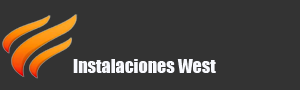
<style>
.page{position:relative;width:300px;height:90px;background:#333333}
.page>*{position:absolute;margin:0}
.t1{font:18px "Impact";color:#f8f9fe}
</style>
<div class="page">
<p class="t1" style="left:73px;top:59px;width:143px;height:14px">Instalaciones West</p>
</div>
